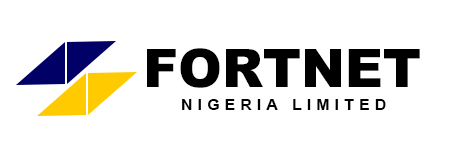
<style>
.page{position:relative;width:452px;height:155px;background:#ffffff}
.page>*{position:absolute;margin:0}
.t1{font:53.2px "Arial-Black";color:#000000}
.t2{font:15.5px "Arial-BoldMT";letter-spacing:0.34em;color:#000000}
</style>
<div class="page">
<p class="t1" style="left:147px;top:48px;width:273px;height:40px">FORTNET</p>
<p class="t2" style="left:182px;top:99px;width:204px;height:11px">NIGERIA LIMITED</p>
</div>
